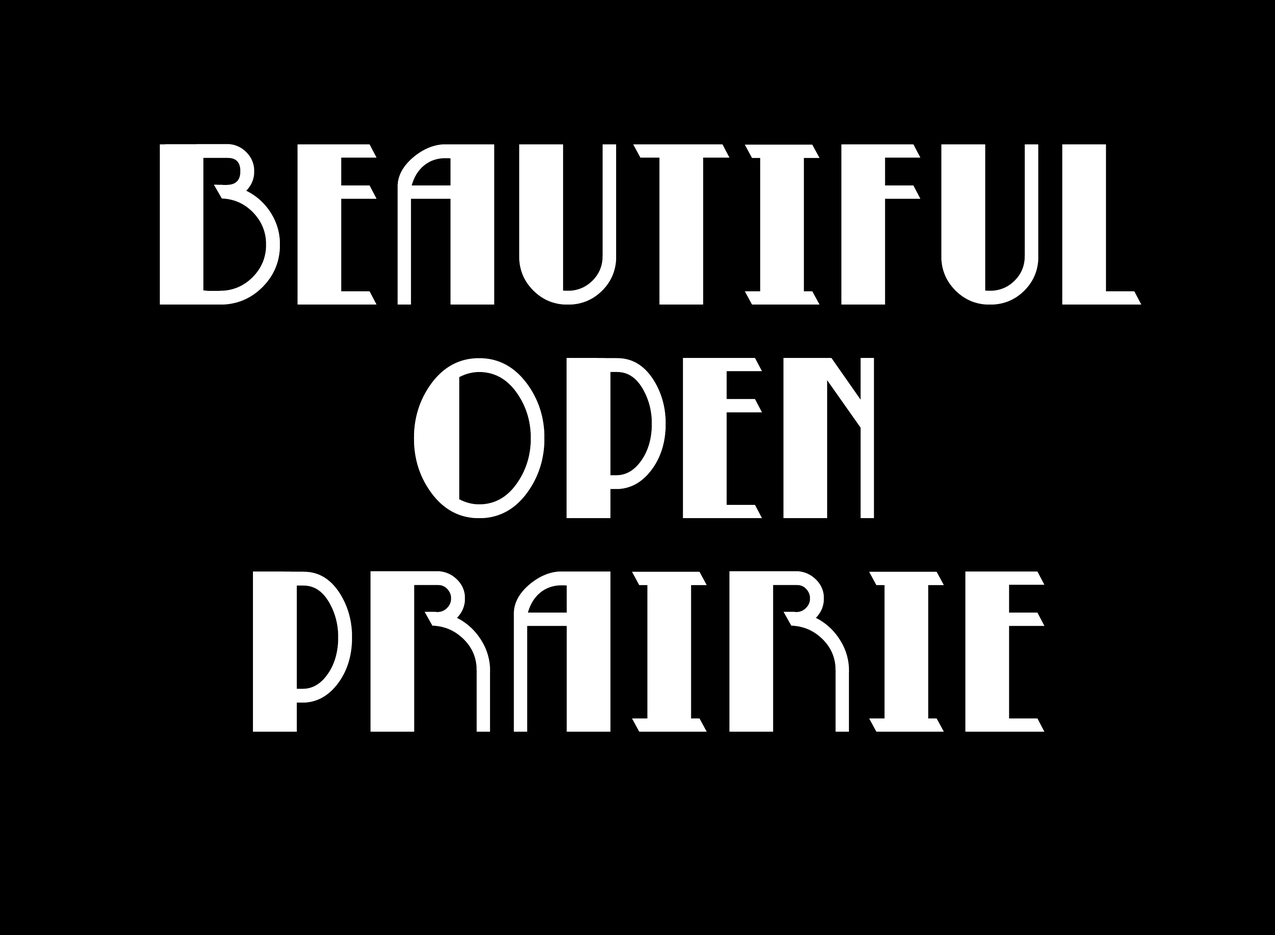
<style>
.page{position:relative;width:1275px;height:935px;background:#000000}
.page>*{position:absolute;margin:0}
.t1{font:237.4px/213.6px "BettyNoir";color:#ffffff}
</style>
<div class="page">
<p class="t1" style="left:160px;top:144px;width:981px;height:588px;text-align:center">beautiful<br>open<br>prairie</p>
</div>
